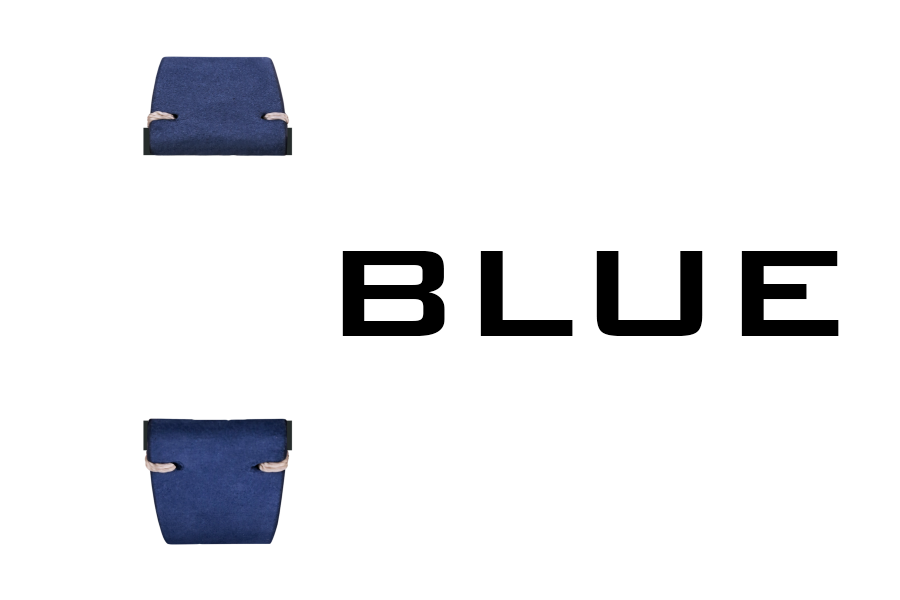
<style>
.page{position:relative;width:900px;height:600px;background:#ffffff}
.page>*{position:absolute;margin:0}
.t1{font:200px "BankGothicBT-Medium";color:#000000;scale:1.05 1}
</style>
<div class="page">
<p class="t1" style="left:342px;top:251px;width:497px;height:85px">blue</p>
</div>
